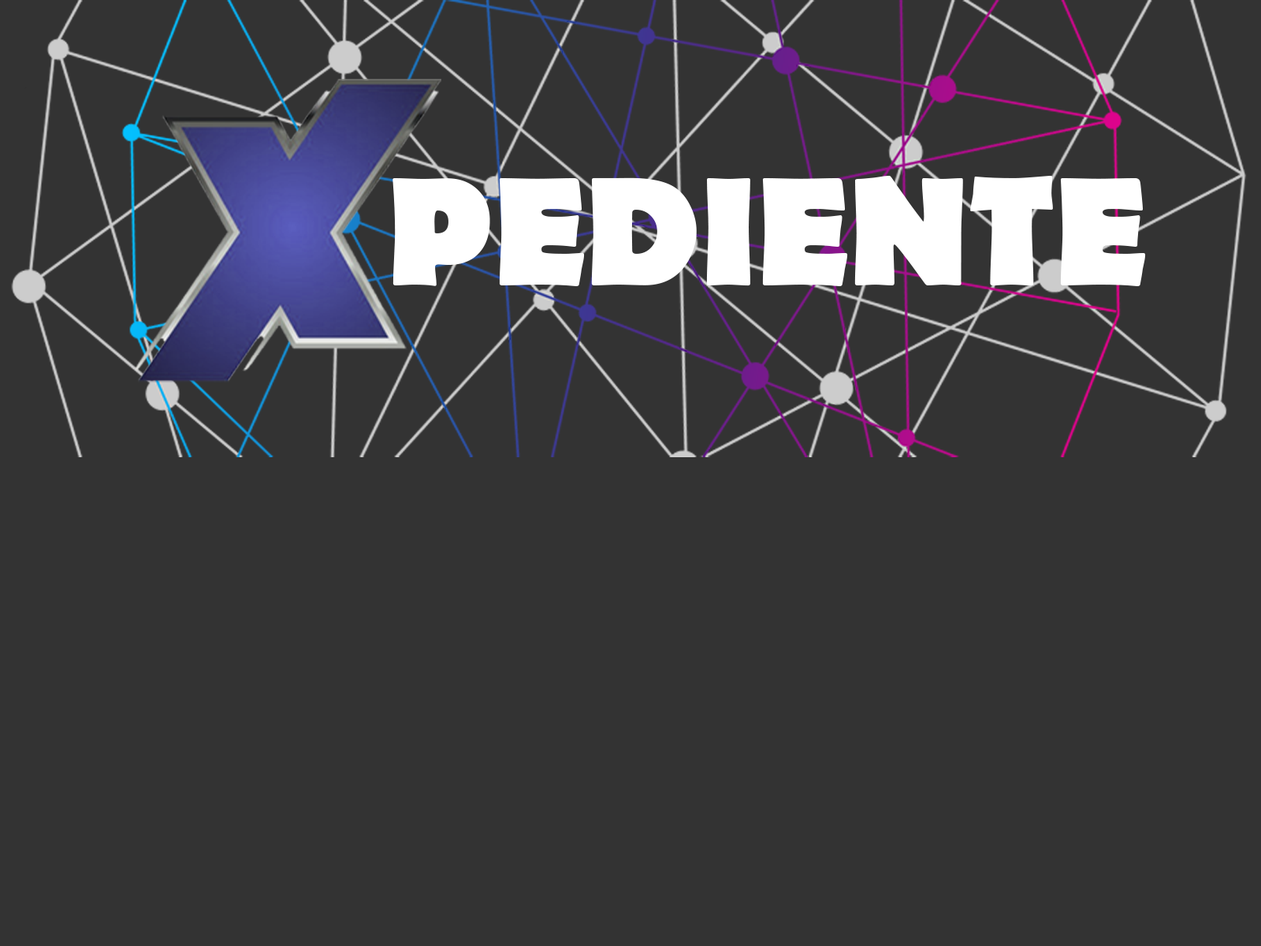
<style>
.page{position:relative;width:1261px;height:946px;background:#333333}
.page>*{position:absolute;margin:0}
.t1{font:156.5px "BerlinSansFB-Bold";color:#ffffff}
</style>
<div class="page">
<p class="t1" style="left:392px;top:175px;width:754px;height:111px">PEDIENTE</p>
</div>
